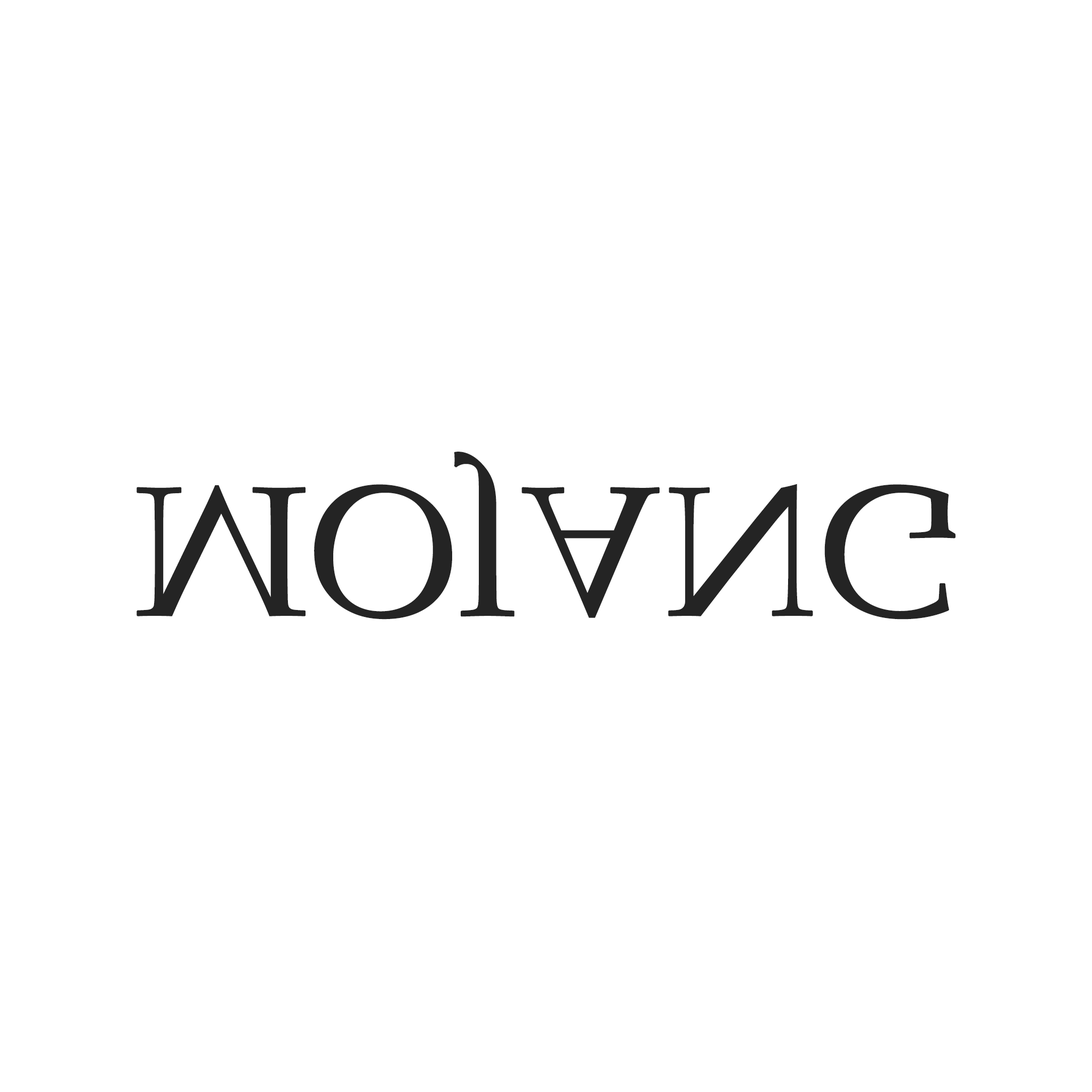
<style>
.page{position:relative;width:1092px;height:1092px;background:#ffffff}
.page>*{position:absolute;margin:0}
.t1{font:186.5px "PalatinoLinotype-Roman";color:#242424}
</style>
<div class="page">
<p class="t1" style="left:136px;top:452px;width:819px;height:168px">MOJANG</p>
</div>
